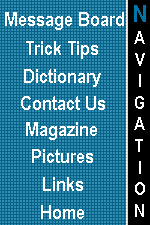
<style>
.page{position:relative;width:150px;height:225px;background:#076288}
.page>*{position:absolute;margin:0}
.t1{font:18px "ArialNarrow-Bold";color:#ffffff}
.t2{font:24px "ArialNarrow-Bold";color:#0075a6}
.t3{font:20px "ArialNarrow-Bold";color:#ffffff}
</style>
<div class="page">
<p class="t1" style="left:134px;top:5px;width:12px;height:212px;text-align:center"><span class="t2">N<br></span>A<br>V<br>I<br>GA<br>T<br>I<br>ON</p>
<p class="t3" style="left:5px;top:12px;width:119px;height:18px">Message Board</p>
<p class="t3" style="left:26px;top:41px;width:72px;height:18px">Trick Tips</p>
<p class="t3" style="left:24px;top:69px;width:77px;height:18px">Dictionary</p>
<p class="t3" style="left:21px;top:96px;width:84px;height:14px">Contact Us</p>
<p class="t3" style="left:26px;top:122px;width:71px;height:18px">Magazine</p>
<p class="t3" style="left:32px;top:149px;width:61px;height:14px">Pictures</p>
<p class="t3" style="left:43px;top:177px;width:40px;height:14px">Links</p>
<p class="t3" style="left:41px;top:205px;width:43px;height:14px">Home</p>
</div>
